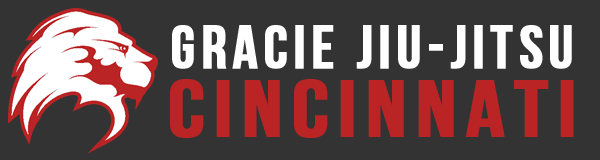
<style>
.page{position:relative;width:600px;height:160px;background:#333333}
.page>*{position:absolute;margin:0}
.t1{font:61px "BebasNeueBold";letter-spacing:0.08em;color:#ffffff;font-weight:bold}
.t2{font:80px "BebasNeueBold";letter-spacing:0.08em;color:#ba2424;font-weight:bold;scale:1.17 1}
</style>
<div class="page">
<p class="t1" style="left:172px;top:25px;width:400px;height:44px">GRACIE JIU-JITSU</p>
<p class="t2" style="left:170px;top:79px;width:404px;height:59px">CINCINNATI</p>
</div>
